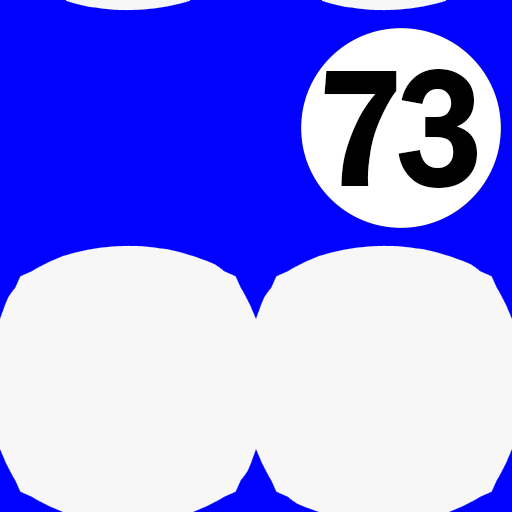
<style>
.page{position:relative;width:512px;height:512px;background:#f7f7f7}
.page>*{position:absolute;margin:0}
.t1{font:172.5px "FranklinGothic-Demi";letter-spacing:-0.05em;color:#010101;scale:0.87 1}
</style>
<div class="page">
<p class="t1" style="left:324px;top:69px;width:153px;height:119px">73</p>
</div>
